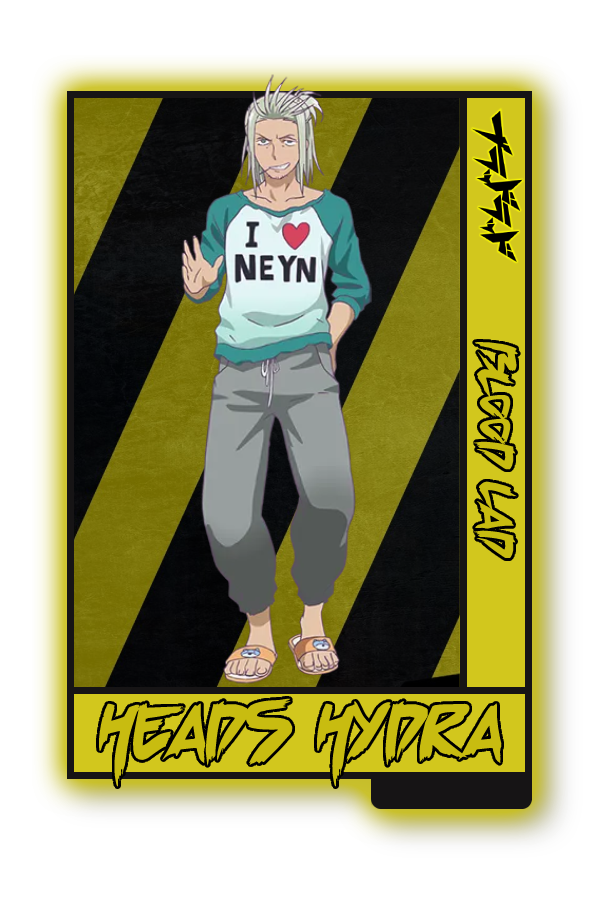
<style>
.page{position:relative;width:600px;height:900px;background:#ffffff}
.page>*{position:absolute;margin:0}
.t1{font:48.8px "ChillingSabrina";color:#c8bc10}
.t2{font:75px "ChillingSabrina";color:#c8bc10}
</style>
<div class="page">
<p class="t1" style="left:473px;top:341px;width:45px;height:218px;rotate:90deg">Blood Lad</p>
<p class="t2" style="left:98px;top:698px;width:404px;height:89px">HEADS Hydra</p>
</div>
